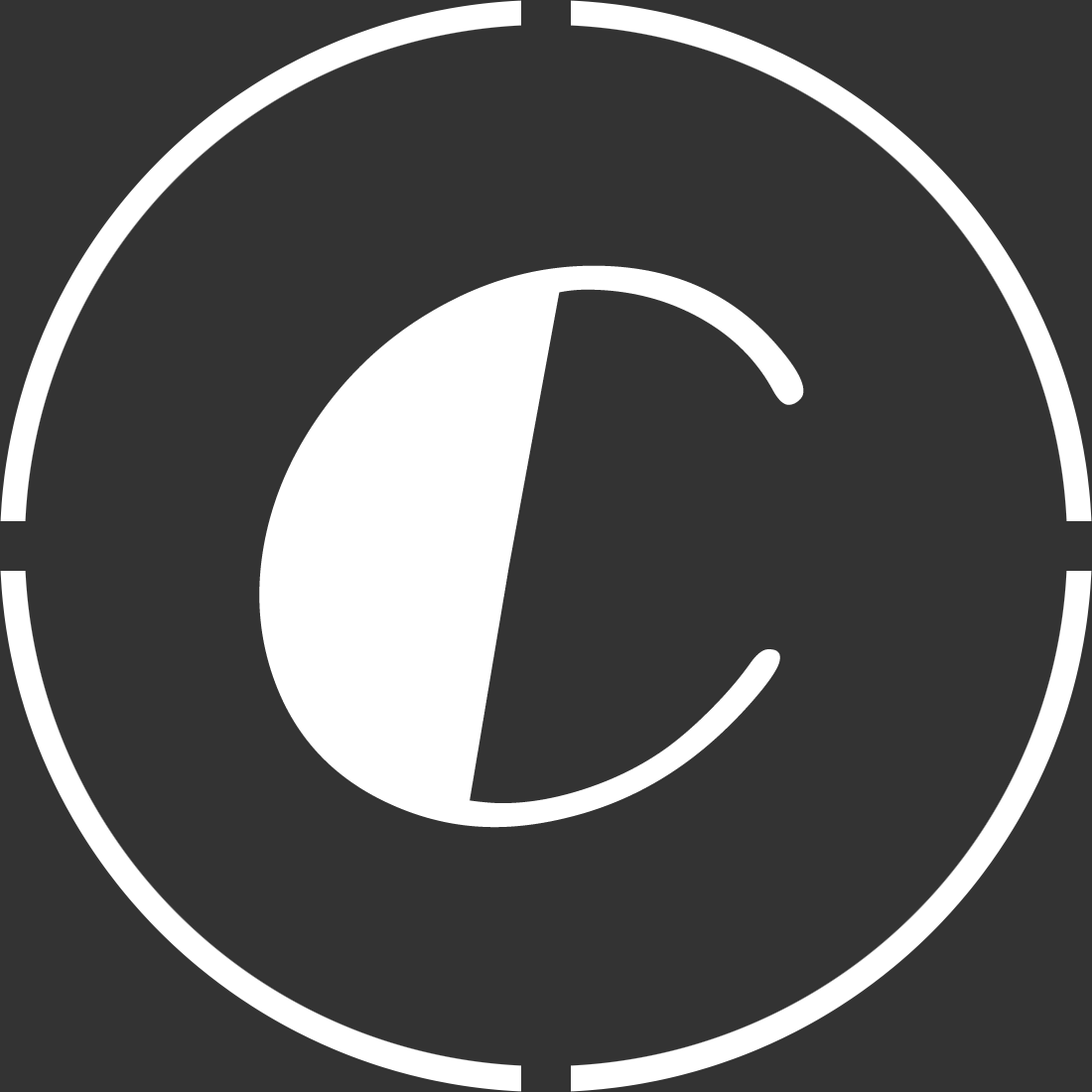
<style>
.page{position:relative;width:1092px;height:1092px;background:#333333}
.page>*{position:absolute;margin:0}
.t1{font:794.2px "Broadway";color:#ffffff;font-style:italic}
</style>
<div class="page">
<p class="t1" style="left:259px;top:265px;width:545px;height:563px">C</p>
</div>
